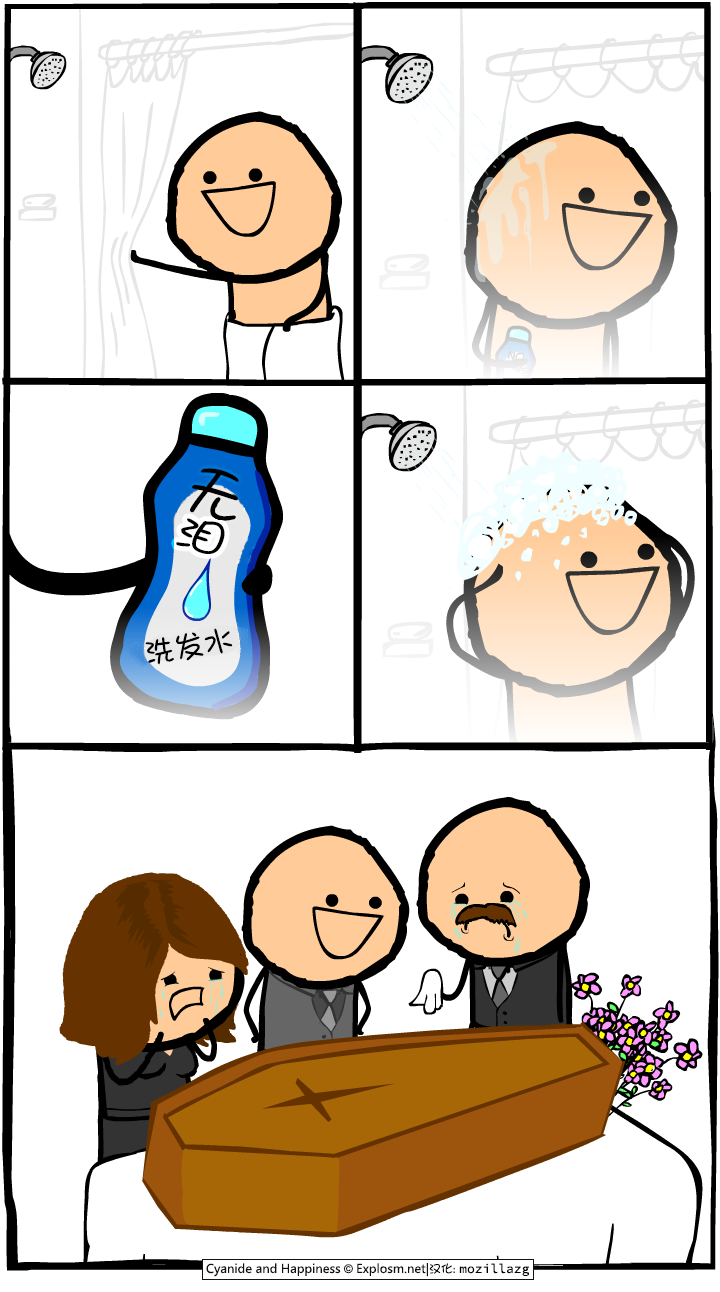
<style>
.page{position:relative;width:720px;height:1292px;background:#ffffff}
.page>*{position:absolute;margin:0}
.t1{font:48px "DFGirl";color:#000000}
.t2{font:41.2px "DFGirl";color:#000000;scale:1.25 1}
.t3{font:30px "DFGirl";color:#000000}
</style>
<div class="page">
<p class="t1" style="left:190px;top:468px;width:49px;height:53px;rotate:13deg">无</p>
<p class="t2" style="left:176px;top:518px;width:49px;height:36px;rotate:13deg">泪</p>
<p class="t3" style="left:145px;top:628px;width:88px;height:37px;rotate:-9deg">洗发水</p>
</div>
